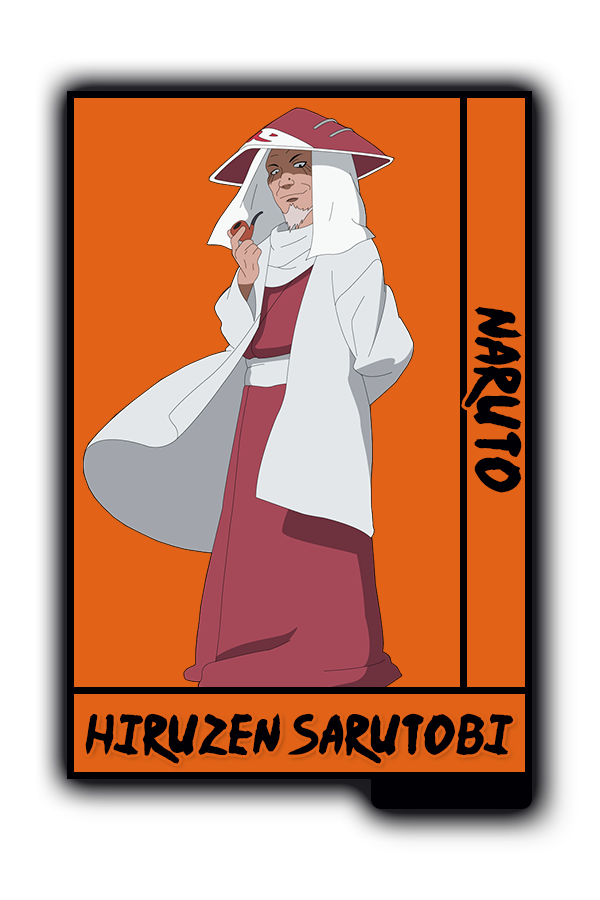
<style>
.page{position:relative;width:600px;height:900px;background:#e26317}
.page>*{position:absolute;margin:0}
.t1{font:52px "Ninja-Naruto";color:#010005}
.t2{font:45.6px "Ninja-Naruto";color:#010005}
</style>
<div class="page">
<p class="t1" style="left:464px;top:307px;width:59px;height:186px;rotate:90deg">Naruto</p>
<p class="t2" style="left:85px;top:713px;width:428px;height:51px">Hiruzen Sarutobi</p>
</div>
